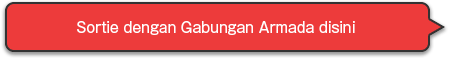
<style>
.page{position:relative;width:450px;height:58px;background:#ed3b3b}
.page>*{position:absolute;margin:0}
.t1{font:14px "GothicMB101Pro-Regular";color:#ffffff}
</style>
<div class="page">
<p class="t1" style="left:77px;top:21px;width:278px;height:14px">Sortie dengan Gabungan Armada disini</p>
</div>
